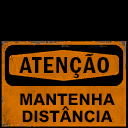
<style>
.page{position:relative;width:128px;height:128px;background:#000000}
.page>*{position:absolute;margin:0}
.t1{font:23.1px "FranklinGothic-DemiCnd";letter-spacing:0.05em;color:#000000}
.t2{font:16px "MHeiPRC-Xbold";color:#000000}
.t3{font:11.1px "FranklinGothic-DemiCnd";letter-spacing:0.05em;color:#000000;scale:1.29 1}
</style>
<div class="page">
<p class="t1" style="left:19px;top:53px;width:90px;height:25px">ATENÇÃO</p>
<p class="t2" style="left:20px;top:93px;width:95px;height:12px">MANTENHA</p>
<p class="t2" style="left:22px;top:110px;width:91px;height:13px">DISTANCIA</p>
<p class="t3" style="left:62px;top:106px;width:7px;height:5px">^</p>
</div>
